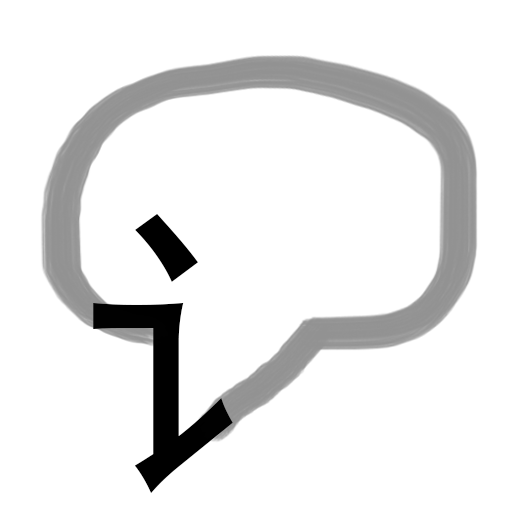
<style>
.page{position:relative;width:523px;height:522px;background:#ffffff}
.page>*{position:absolute;margin:0}
.t1{font:300px "STHeitiTC-Medium";color:#000000}
</style>
<div class="page">
<p class="t1" style="left:93px;top:214px;width:140px;height:279px">讠</p>
</div>
